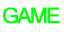
<style>
.page{position:relative;width:64px;height:32px;background:#ffffff}
.page>*{position:absolute;margin:0}
.t1{font:20px "HGPHeiseiKakugothictaiW5L1";letter-spacing:-0.1em;color:#00ff00;font-weight:bold}
</style>
<div class="page">
<p class="t1" style="left:3px;top:7px;width:57px;height:17px">GAME</p>
</div>
